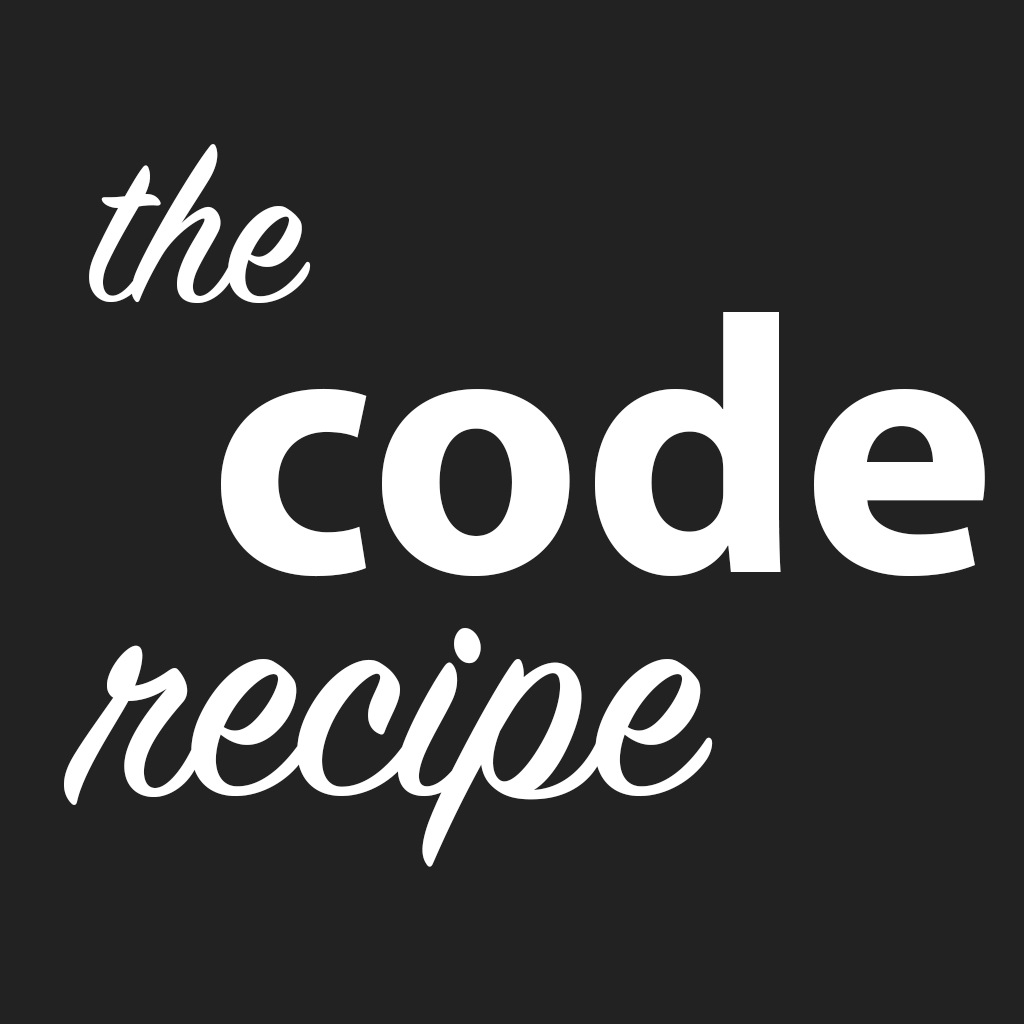
<style>
.page{position:relative;width:1024px;height:1024px;background:#222222}
.page>*{position:absolute;margin:0}
.t1{font:233.3px "SignPainter-HouseScript";color:#ffffff}
.t2{font:366.7px "MyriadPro-Bold";color:#ffffff}
.t3{font:333.3px "SignPainter-HouseScript";color:#ffffff}
</style>
<div class="page">
<p class="t1" style="left:89px;top:144px;width:222px;height:159px">the</p>
<p class="t2" style="left:221px;top:312px;width:764px;height:265px">code</p>
<p class="t3" style="left:64px;top:628px;width:649px;height:239px">recipe</p>
</div>
